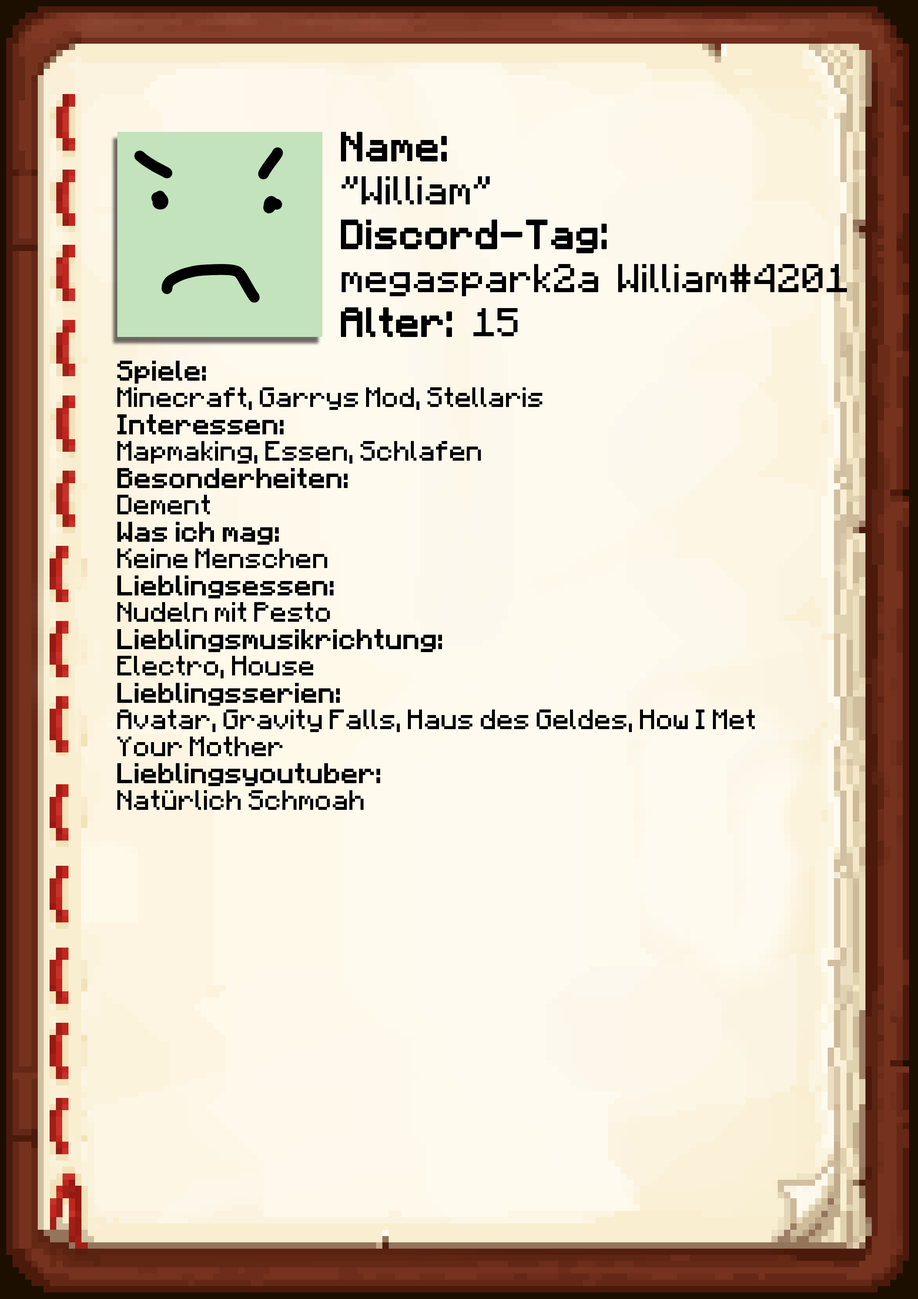
<style>
.page{position:relative;width:918px;height:1299px}
.page>*{position:absolute;margin:0}
.t1{font:40.1px/43.9px "Minecraft-Regular";color:#000000}
.t2{font:40.1px/43.9px "Minecraft-Regular";color:#000000;font-weight:bold}
.t3{font:22.4px "Minecraft";color:#000000}
.t4{font:22.4px "Minecraft";color:#000000;font-weight:bold}
</style>
<div class="page">
<p class="t1" style="left:341px;top:132px;width:506px;height:205px"><span class="t2">Name:<br></span>"William"<br><span class="t2">Discord-Tag:<br></span>megaspark2a William#4201<br><span class="t2">Alter: </span>15</p>
<p class="t3" style="left:117px;top:361px;width:638px;height:449px"><span class="t4">Spiele: <br></span>Minecraft, Garrys Mod, Stellaris<br><span class="t4">Interessen:<br></span>Mapmaking, Essen, Schlafen<br><span class="t4">Besonderheiten:<br></span>Dement<br><span class="t4">Was ich mag:<br></span>Keine Menschen<br><span class="t4">Lieblingsessen:<br></span>Nudeln mit Pesto<br><span class="t4">Lieblingsmusikrichtung:<br></span>Electro, House<br><span class="t4">Lieblingsserien:<br></span>Avatar, Gravity Falls, Haus des Geldes, How I Met Your Mother<br><span class="t4">Lieblingsyoutuber:<br></span>Natürlich Schmoah</p>
</div>
